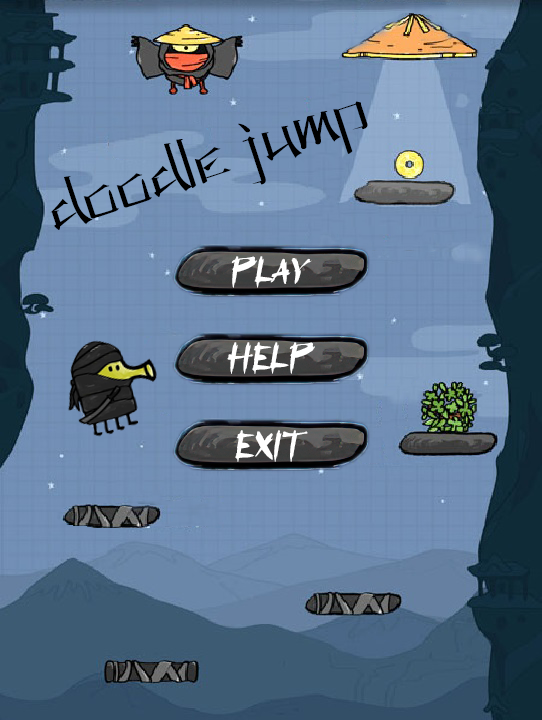
<style>
.page{position:relative;width:542px;height:720px}
.page>*{position:absolute;margin:0}
.t1{font:60px "KANEIWA-alp-regular";color:#000000}
.t2{font:35px "aAssassinNinja";color:#ffffff}
</style>
<div class="page">
<p class="t1" style="left:50px;top:101px;width:318px;height:129px;rotate:-18deg">doodle jump</p>
<p class="t2" style="left:231px;top:256px;width:81px;height:32px">PLAY</p>
<p class="t2" style="left:227px;top:342px;width:88px;height:32px">HELP</p>
<p class="t2" style="left:235px;top:430px;width:73px;height:32px">EXIT</p>
</div>
